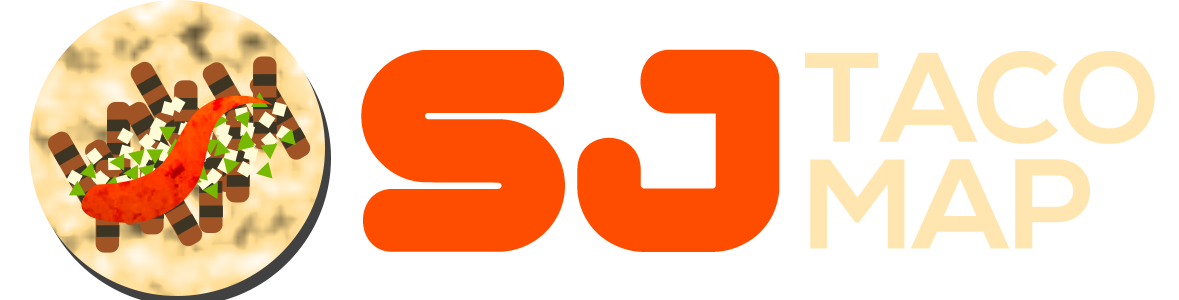
<style>
.page{position:relative;width:1179px;height:300px;background:#ffffff}
.page>*{position:absolute;margin:0}
.t1{font:288.4px "Gota";letter-spacing:0.02em;color:#ff4d00;text-transform:uppercase}
.t2{font:127px/106.5px "NexaBold";color:#ffe6b0;text-transform:uppercase}
</style>
<div class="page">
<p class="t1" style="left:361px;top:49px;width:419px;height:203px">SJ</p>
<p class="t2" style="left:805px;top:51px;width:350px;height:198px">TACO <br>MAP</p>
</div>
